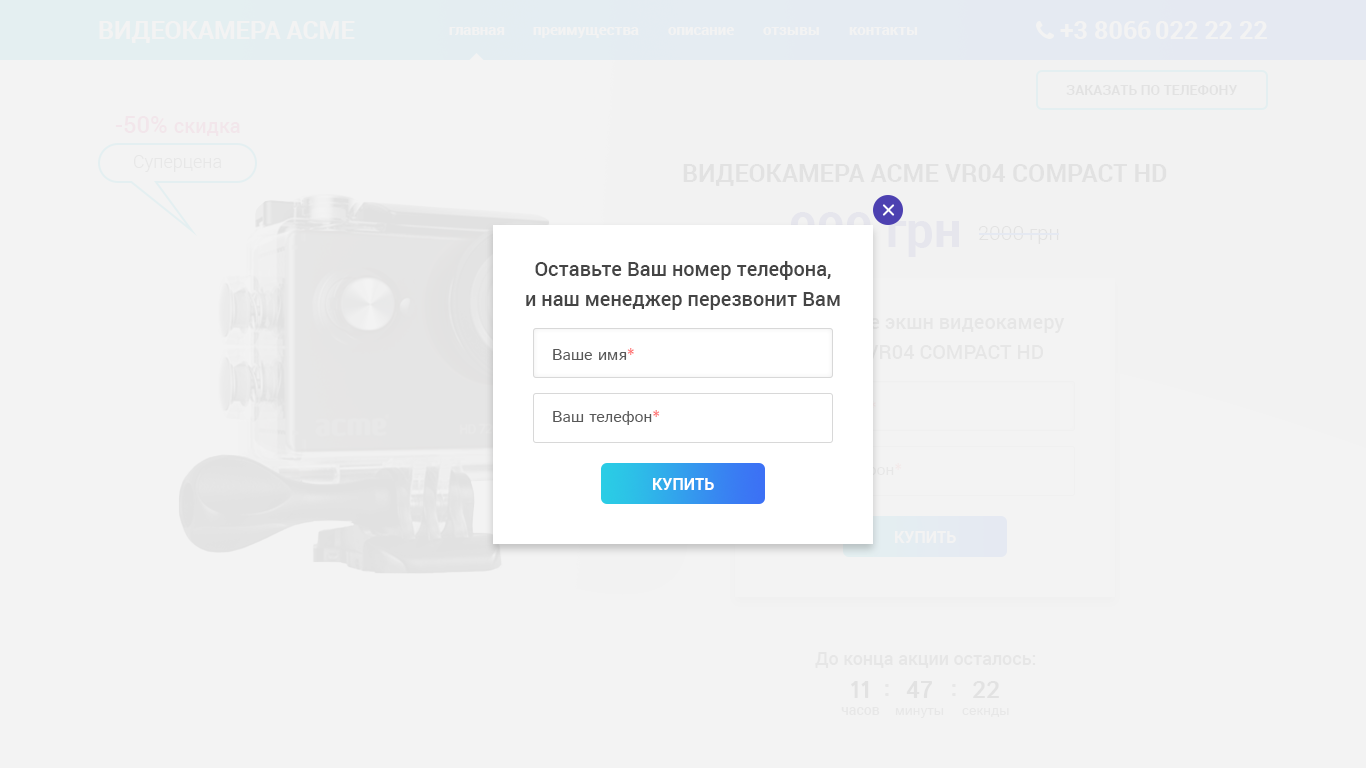
<style>
.page{position:relative;width:1366px;height:768px;background:#f3f3f3}
.page>*{position:absolute;margin:0}
.t1{font:25px "Roboto-Bold";color:#ffffff;text-transform:uppercase}
.t2{font:15px "Roboto-Bold";color:#ffffff}
.t3{font:14px "Roboto-Bold";color:#e2e2e2;text-transform:uppercase}
.t4{font:20px "Roboto-Medium";color:#f2e6eb}
.t5{font:24px "Roboto-Medium";color:#f2e6eb}
.t6{font:18px "Roboto-Light";color:#e7e7e7}
.t7{font:25px "Roboto-Bold";color:#e2e2e2;text-transform:uppercase}
.t8{font:20px "Roboto-Light";color:#e2e2e2}
.t9{font:20px/30px "Roboto-Medium";color:#454545}
.t10{font:20px/30px "Roboto-Medium";color:#e6e6e6}
.t11{font:16px "IstokWeb-Regular";color:#585858}
.t12{font:16px "IstokWeb-Regular";color:#ff7676}
.t13{font:16px "Roboto-Bold";color:#ffffff;text-transform:uppercase}
.t14{font:18px "Roboto-Medium";color:#e6e6e6}
.t15{font:24px "IstokWeb-Bold";color:#e2e2e2}
.t16{font:24px "IstokWeb-Bold";color:#e7e7e7}
.t17{font:14px "Roboto-Medium";color:#e7e7e7}
.t18{font:14px "IstokWeb-Regular";color:#e7e7e7}
</style>
<div class="page">
<p class="t1" style="left:99px;top:21px;width:256px;height:22px">Видеокамера Acme</p>
<p class="t2" style="left:449px;top:27px;width:56px;height:8px">главная</p>
<p class="t2" style="left:533px;top:27px;width:106px;height:11px">преимущества</p>
<p class="t2" style="left:668px;top:27px;width:66px;height:8px">описание</p>
<p class="t2" style="left:763px;top:27px;width:56px;height:8px">отзывы</p>
<p class="t2" style="left:849px;top:27px;width:69px;height:8px">контакты</p>
<p class="t1" style="left:1060px;top:21px;width:207px;height:18px">+3 8066 022 22 22</p>
<p class="t3" style="left:1066px;top:85px;width:172px;height:10px">Заказать по телефону</p>
<p class="t4" style="left:115px;top:116px;width:125px;height:20px"><span class="t5">-50% </span>скидка</p>
<p class="t6" style="left:134px;top:155px;width:88px;height:17px">Суперцена</p>
<p class="t7" style="left:683px;top:164px;width:484px;height:22px">Видеокамера Acme VR04 Compact HD</p>
<p class="t8" style="left:979px;top:226px;width:80px;height:18px">2000 грн</p>
<p class="t9" style="left:526px;top:261px;width:314px;height:49px;text-align:center">Оставьте Ваш номер телефона,<br>и наш менеджер перезвонит Вам</p>
<p class="t10" style="left:786px;top:315px;width:279px;height:44px;text-align:center">Закажите экшн видеокамеру<br>ACME VR04 COMPACT HD</p>
<p class="t11" style="left:553px;top:348px;width:81px;height:12px">Ваше имя<span class="t12">*</span></p>
<p class="t11" style="left:553px;top:410px;width:107px;height:15px">Ваш телефон<span class="t12">*</span></p>
<p class="t13" style="left:653px;top:478px;width:61px;height:12px">купить</p>
<p class="t13" style="left:895px;top:531px;width:61px;height:12px">купить</p>
<p class="t14" style="left:815px;top:652px;width:221px;height:16px">До конца акции осталось:</p>
<p class="t15" style="left:851px;top:681px;width:18px;height:17px">11</p>
<p class="t16" style="left:885px;top:684px;width:4px;height:12px">:</p>
<p class="t15" style="left:906px;top:681px;width:26px;height:17px">47</p>
<p class="t16" style="left:952px;top:684px;width:4px;height:12px">:</p>
<p class="t15" style="left:973px;top:681px;width:26px;height:17px">22</p>
<p class="t17" style="left:841px;top:707px;width:39px;height:8px">часов</p>
<p class="t18" style="left:895px;top:708px;width:49px;height:10px">минуты</p>
<p class="t18" style="left:962px;top:708px;width:47px;height:9px">секнды</p>
</div>
